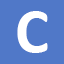
<style>
.page{position:relative;width:64px;height:64px;background:#5078c8}
.page>*{position:absolute;margin:0}
.t1{font:64px "Calibri-Bold";color:#ffffff}
</style>
<div class="page">
<p class="t1" style="left:17px;top:11px;width:31px;height:42px">C</p>
</div>
